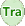
<style>
.page{position:relative;width:25px;height:26px}
.page>*{position:absolute;margin:0}
.t1{font:12.7px "LaoUI-Bold";color:#1d8500}
</style>
<div class="page">
<p class="t1" style="left:2px;top:7px;width:19px;height:10px">Tra</p>
</div>
